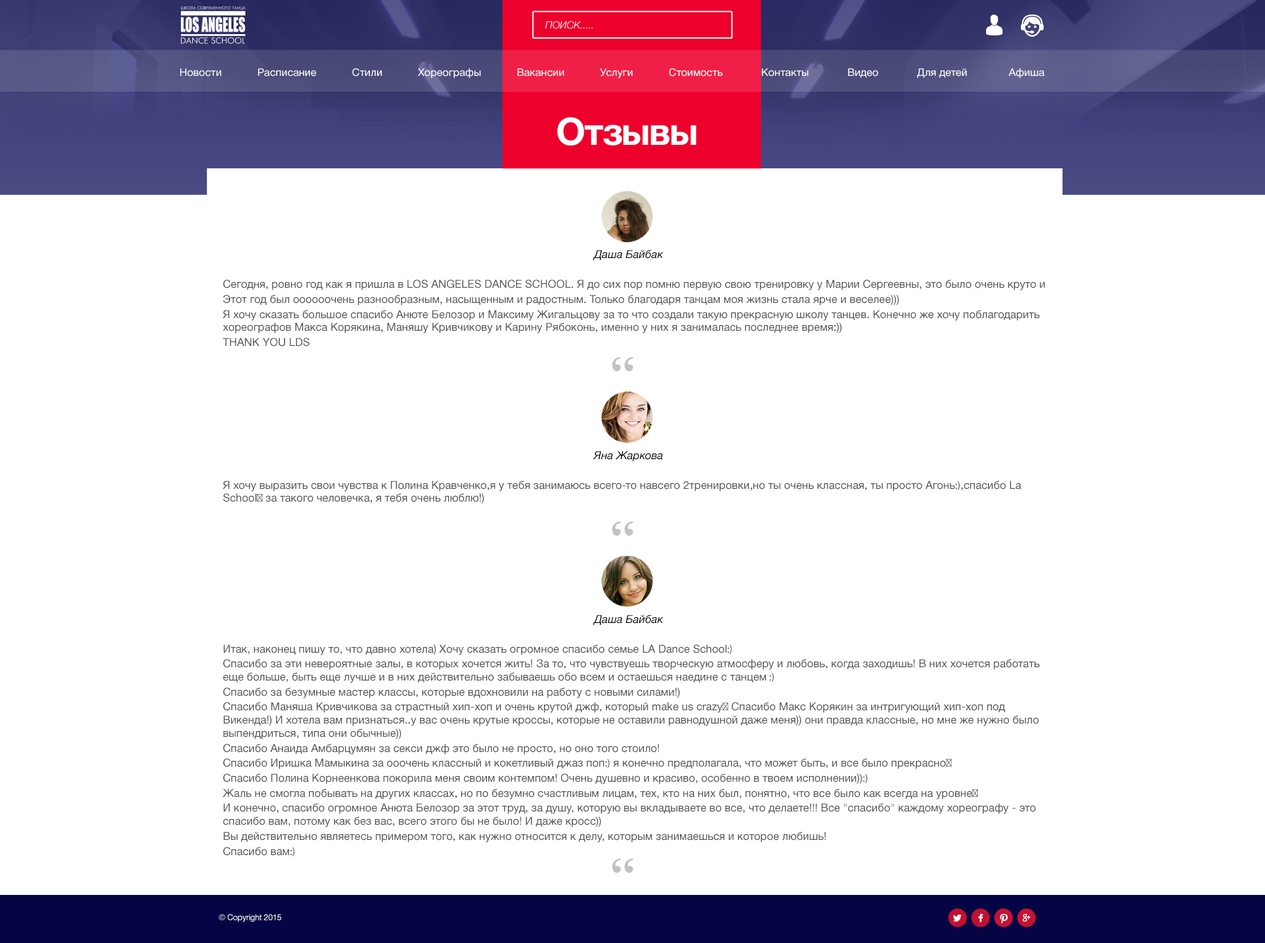
<style>
.page{position:relative;width:1265px;height:943px;background:#ffffff}
.page>*{position:absolute;margin:0}
.t1{font:10px "HelveticaNeueCyr-LightItalic";color:#ffffff;text-transform:uppercase}
.t2{font:10.3px "HelveticaNeueCyr-Roman";color:#ffffff}
.t3{font:37.8px "HelveticaNeueCyr-Bold";letter-spacing:-0.025em;color:#ffffff}
.t4{font:11.1px "HelveticaNeueCyr-Italic";color:#000000}
.t5{font:11px "HelveticaNeueCyr-Roman";color:#505050}
.t6{font:47.2px "IskoolaPota-Bold";color:#c2c2c2}
.t7{font:11px "MyriadPro-Regular";color:#505050}
.t8{font:11px "MinionPro-Regular";color:#505050}
.t9{font:8.3px "HelveticaNeueCyr-Roman";letter-spacing:-0.025em;color:#ffffff}
</style>
<div class="page">
<p class="t1" style="left:545px;top:21px;width:48px;height:8px">ПОИСК.....</p>
<p class="t2" style="left:180px;top:68px;width:865px;height:10px">Новости            Расписание            Стили            Хореографы            Вакансии            Услуги            Стоимость             Контакты             Видео             Для детей              Афиша</p>
<p class="t3" style="left:557px;top:117px;width:139px;height:28px">Отзывы</p>
<p class="t4" style="left:593px;top:250px;width:70px;height:11px">Даша Байбак</p>
<p class="t5" style="left:223px;top:280px;width:822px;height:67px">Сегодня, ровно год как я пришла в LOS ANGELES DANCE SCHOOL. Я до сих пор помню первую свою тренировку у Марии Сергеевны, это было очень круто и<br>Этот год был оооооочень разнообразным, насыщенным и радостным. Только благодаря танцам моя жизнь стала ярче и веселее)))<br>Я хочу сказать большое спасибо Анюте Белозор и Максиму Жигальцову за то что создали такую прекрасную школу танцев. Конечно же хочу поблагодарить хореографов Макса Корякина, Маняшу Кривчикову и Карину Рябоконь, именно у них я занималась последнее время:))<br>THANK YOU LDS</p>
<p class="t6" style="left:612px;top:357px;width:21px;height:14px">“</p>
<p class="t4" style="left:593px;top:451px;width:70px;height:11px">Яна Жаркова</p>
<p class="t5" style="left:223px;top:481px;width:798px;height:23px">Я хочу выразить свои чувства к Полина Кравченко,я у тебя занимаюсь всего-то навсего 2тренировки,но ты очень классная, ты просто Агонь<span class="t7">:)</span>,спасибо La School<span class="t8">😎</span> за такого человечка, я тебя очень люблю!)</p>
<p class="t6" style="left:612px;top:521px;width:21px;height:15px">“</p>
<p class="t4" style="left:593px;top:615px;width:70px;height:10px">Даша Байбак</p>
<p class="t5" style="left:223px;top:644px;width:817px;height:212px">Итак, наконец пишу то, что давно хотела) Хочу сказать огромное спасибо семье LA Dance School<span class="t7">:)<br></span>Спасибо за эти невероятные залы, в которых хочется жить! За то, что чувствуешь творческую атмосферу и любовь, когда заходишь! В них хочется работать еще больше, быть еще лучше и в них действительно забываешь обо всем и остаешься наедине с танцем<span class="t7"> :)<br></span>Спасибо за безумные мастер классы, которые вдохновили на работу с новыми силами!) <br>Спасибо Маняша Кривчикова за страстный хип-хоп и очень крутой джф, который make us crazy<span class="t8">😌</span> Спасибо Макс Корякин за интригующий хип-хоп под Викенда!) И хотела вам признаться..у вас очень крутые кроссы, которые не оставили равнодушной даже меня)) они правда классные, но мне же нужно было выпендриться, типа они обычные)) <br>Спасибо Анаида Амбарцумян за секси джф это было не просто, но оно того стоило! <br>Спасибо Иришка Мамыкина за ооочень классный и кокетливый джаз поп<span class="t7">:)</span> я конечно предполагала, что может быть, и все было прекрасно<span class="t8">😍</span> <br>Спасибо Полина Корнеенкова покорила меня своим контемпом! Очень душевно и красиво, особенно в твоем исполнении))<span class="t7">:)<br></span>Жаль не смогла побывать на других классах, но по безумно счастливым лицам, тех, кто на них был, понятно, что все было как всегда на уровне<span class="t8">😎</span> <br>И конечно, спасибо огромное Анюта Белозор за этот труд, за душу, которую вы вкладываете во все, что делаете!!! Все "спасибо" каждому хореографу - это спасибо вам, потому как без вас, всего этого бы не было! И даже кросс)) <br>Вы действительно являетесь примером того, как нужно относится к делу, которым занимаешься и которое любишь! <br>Спасибо вам<span class="t7">:)</span></p>
<p class="t6" style="left:612px;top:858px;width:21px;height:15px">“</p>
<p class="t9" style="left:219px;top:914px;width:62px;height:8px">© Copyright 2015</p>
</div>
